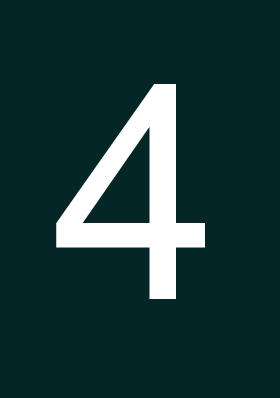
<style>
.page{position:relative;width:280px;height:398px;background:#052626}
.page>*{position:absolute;margin:0}
.t1{font:300px "ArialMT";color:#ffffff}
</style>
<div class="page">
<p class="t1" style="left:56px;top:84px;width:149px;height:215px">4</p>
</div>
